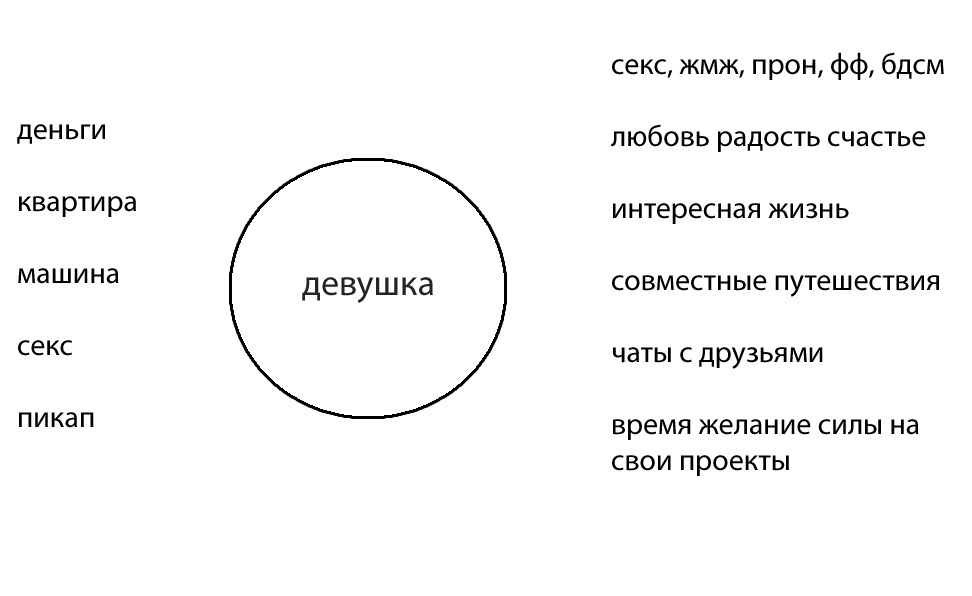
<style>
.page{position:relative;width:972px;height:596px;background:#ffffff}
.page>*{position:absolute;margin:0}
.t1{font:30px "MyriadPro-Regular";color:#000000}
.t2{font:36px "MyriadPro-Regular";color:#242424}
</style>
<div class="page">
<p class="t1" style="left:611px;top:52px;width:333px;height:424px">секс, жмж, прон, фф, бдсм<br><br>любовь радость счастье<br><br>интересная жизнь<br><br>совместные путешествия<br><br>чаты с друзьями<br><br>время желание силы на<br>свои проекты</p>
<p class="t1" style="left:17px;top:124px;width:119px;height:304px">деньги<br><br>квартира<br><br>машина<br><br>секс<br><br>пикап</p>
<p class="t2" style="left:302px;top:277px;width:131px;height:26px">девушка</p>
</div>
